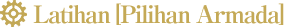
<style>
.page{position:relative;width:295px;height:27px;background:#ffffff}
.page>*{position:absolute;margin:0}
.t1{font:24px "RyuminPro-ExBold";letter-spacing:-0.08em;color:#c4a956}
</style>
<div class="page">
<p class="t1" style="left:33px;top:3px;width:251px;height:22px">Latihan [Pilihan Armada]</p>
</div>
